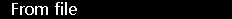
<style>
.page{position:relative;width:232px;height:19px;background:#000000}
.page>*{position:absolute;margin:0}
.t1{font:16px "MicrosoftYaHei";color:#ffffff}
</style>
<div class="page">
<p class="t1" style="left:12px;top:2px;width:65px;height:13px">From file</p>
</div>
